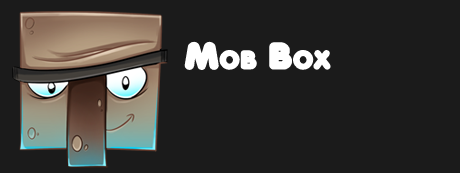
<style>
.page{position:relative;width:460px;height:173px;background:#1b1b1b}
.page>*{position:absolute;margin:0}
.t1{font:36px "AnjaElianeaccent-Nornal";color:#ffffff;font-variant:small-caps;font-weight:bold}
</style>
<div class="page">
<p class="t1" style="left:184px;top:41px;width:147px;height:29px">Mob Box</p>
</div>
